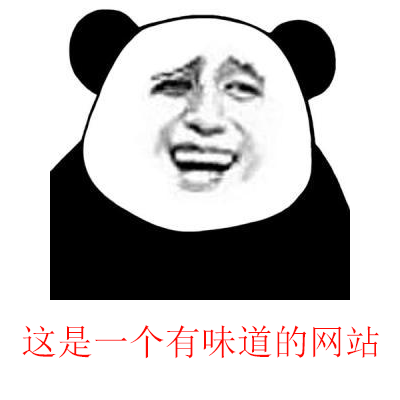
<style>
.page{position:relative;width:400px;height:400px;background:#ffffff}
.page>*{position:absolute;margin:0}
.t1{font:36px "SimSun";color:#ff0a03}
</style>
<div class="page">
<p class="t1" style="left:22px;top:325px;width:357px;height:34px">这是一个有味道的网站</p>
</div>
